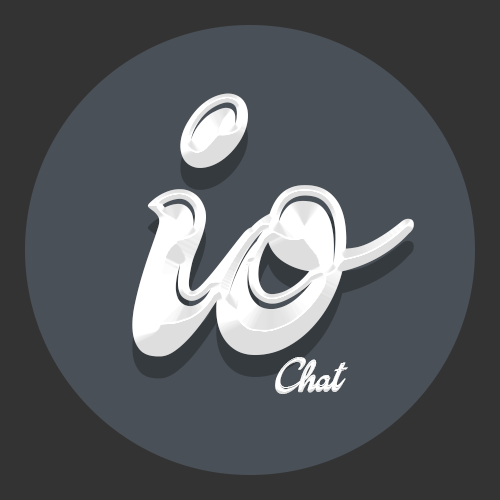
<style>
.page{position:relative;width:500px;height:500px;background:#495057}
.page>*{position:absolute;margin:0}
.t1{font:346.4px "CandyShopPersonalUse";color:#ffffff}
.t2{font:34.6px "CandyShopPersonalUse";color:#ffffff}
</style>
<div class="page">
<p class="t1" style="left:132px;top:93px;width:282px;height:264px">io</p>
<p class="t2" style="left:275px;top:357px;width:73px;height:37px">Chat</p>
</div>
